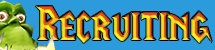
<style>
.page{position:relative;width:215px;height:50px;background:#2c9bdb}
.page>*{position:absolute;margin:0}
.t1{font:48px "LifeCraft"}
</style>
<div class="page">
<p class="t1" style="left:35px;top:6px;width:177px;height:37px">Recruiting</p>
</div>
